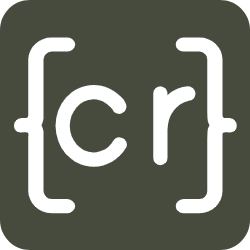
<style>
.page{position:relative;width:250px;height:250px;background:#464b3e}
.page>*{position:absolute;margin:0}
.t1{font:224px "PrintBold";color:#ffffff;scale:1.08 1}
.t2{font:227.7px "PrintBold";color:#ffffff}
</style>
<div class="page">
<p class="t1" style="left:14px;top:37px;width:223px;height:177px">{ }</p>
<p class="t2" style="left:55px;top:85px;width:141px;height:82px">cr</p>
</div>
